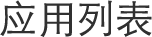
<style>
.page{position:relative;width:152px;height:37px;background:#ffffff}
.page>*{position:absolute;margin:0}
.t1{font:38.9px "STHeitiTC-Light";color:#303030}
</style>
<div class="page">
<p class="t1" style="left:0px;top:0px;width:152px;height:37px">应用列表</p>
</div>
